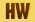
<style>
.page{position:relative;width:35px;height:22px;background:#f1d666}
.page>*{position:absolute;margin:0}
.t1{font:22.4px "Gothic821CondensedBT-Regular";color:#632b02;text-transform:uppercase}
</style>
<div class="page">
<p class="t1" style="left:5px;top:3px;width:25px;height:16px">HW</p>
</div>
